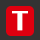
<style>
.page{position:relative;width:40px;height:40px;background:#333333}
.page>*{position:absolute;margin:0}
.t1{font:30px "System";color:#ffffff;font-weight:bold}
</style>
<div class="page">
<p class="t1" style="left:12px;top:11px;width:16px;height:20px">T</p>
</div>
